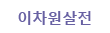
<style>
.page{position:relative;width:110px;height:33px;background:#ffffff}
.page>*{position:absolute;margin:0}
.t1{font:15px "MalgunGothicBold";color:#6861a3}
</style>
<div class="page">
<p class="t1" style="left:18px;top:11px;width:73px;height:14px">이차원살전</p>
</div>
